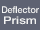
<style>
.page{position:relative;width:40px;height:30px;background:#5e6272}
.page>*{position:absolute;margin:0}
.t1{font:9.3px "HelveticaNeue-Medium";color:#f2f2f2;scale:0.96 1}
.t2{font:10.7px "HelveticaNeue-Medium";color:#f2f2f2;scale:1.2 1}
</style>
<div class="page">
<p class="t1" style="left:2px;top:6px;width:37px;height:8px">Deflector</p>
<p class="t2" style="left:4px;top:16px;width:32px;height:9px">Prism</p>
</div>
